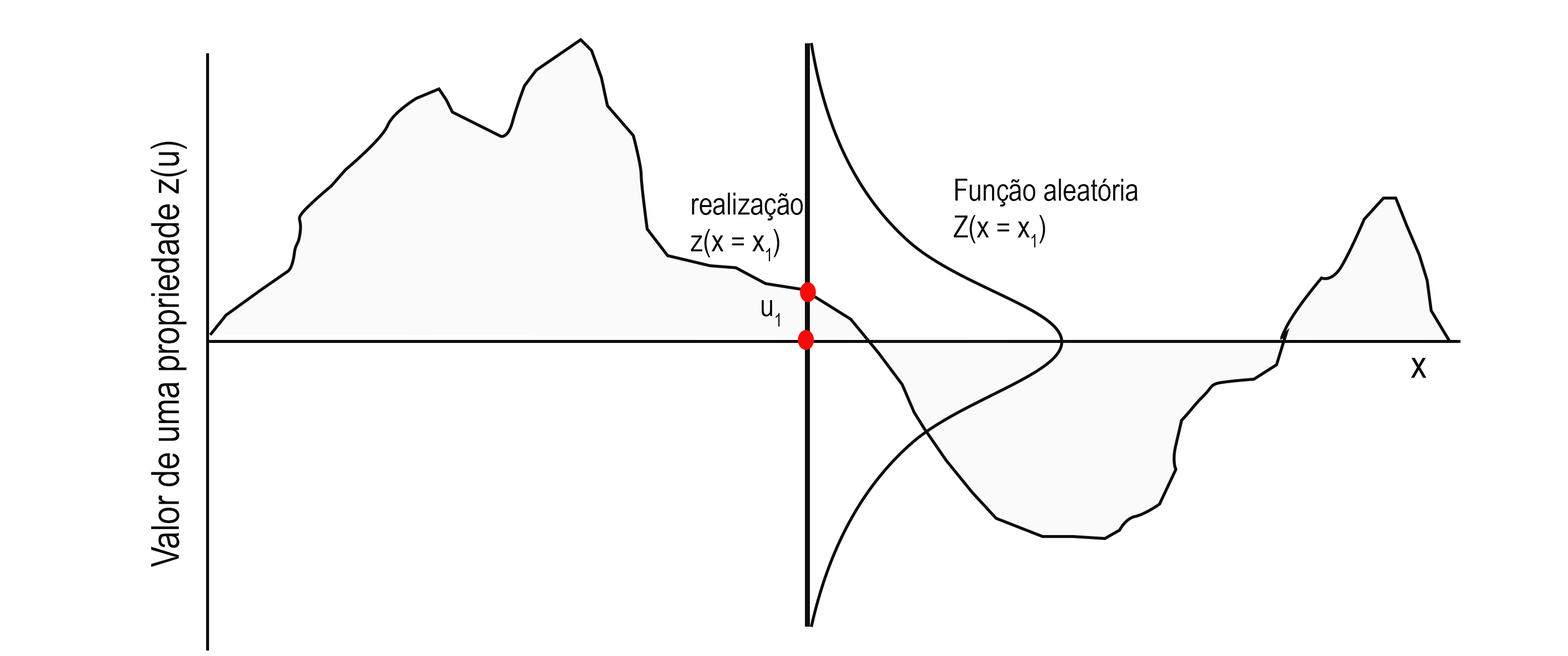
<style>
.page{position:relative;width:1568px;height:656px;background:#ffffff}
.page>*{position:absolute;margin:0}
.t1{font:66.4px "ArialNarrow";color:#090909}
.t2{font:30.4px "ArialNarrow";color:#090909}
</style>
<div class="page">
<p class="t1" style="left:150px;top:141px;width:37px;height:426px;rotate:-90deg">Valor de uma propriedade z(u)</p>
<p class="t2" style="left:954px;top:179px;width:184px;height:68px">Função aleatória <br>Z(x = x1)</p>
<p class="t2" style="left:691px;top:193px;width:112px;height:68px">realização <br>z(x = x1)</p>
<p class="t2" style="left:762px;top:300px;width:18px;height:27px">u1</p>
<p class="t1" style="left:1411px;top:358px;width:16px;height:20px">x</p>
</div>
